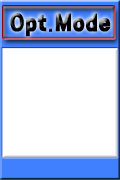
<style>
.page{position:relative;width:120px;height:180px;background:#ffffff}
.page>*{position:absolute;margin:0}
.t1{font:24px "GothicXB-HM"}
</style>
<div class="page">
<p class="t1" style="left:10px;top:13px;width:101px;height:24px">Opt.Mode</p>
</div>
